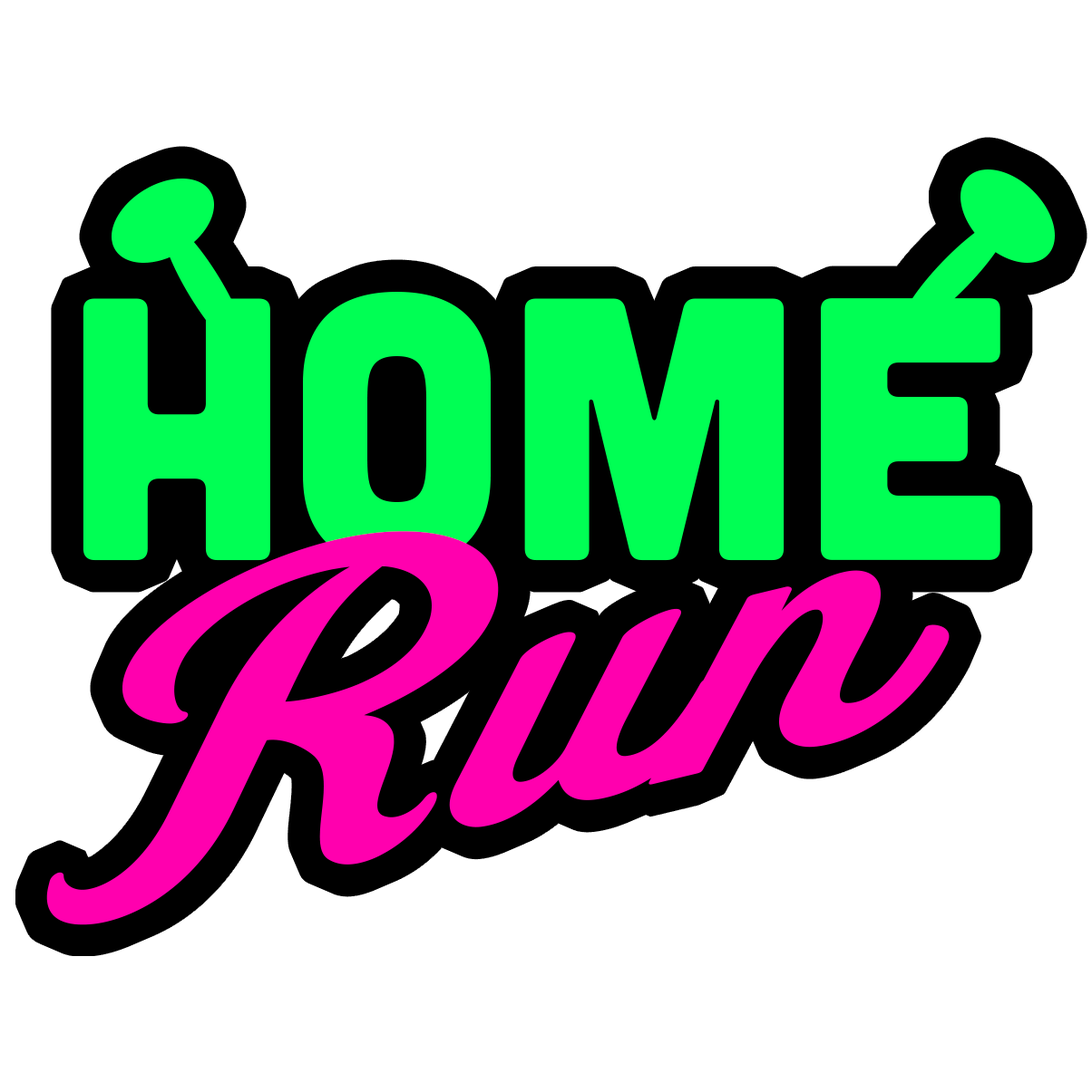
<style>
.page{position:relative;width:1092px;height:1092px;background:#ffffff}
.page>*{position:absolute;margin:0}
.t1{font:373.6px "Cubano-Regular";color:#00ff54}
.t2{font:420.7px "FenwayParkJF";color:#ff00ae;scale:1.36 1}
</style>
<div class="page">
<p class="t1" style="left:82px;top:292px;width:918px;height:275px">Home</p>
<p class="t2" style="left:46px;top:531px;width:903px;height:395px;rotate:-14deg">Run</p>
</div>
